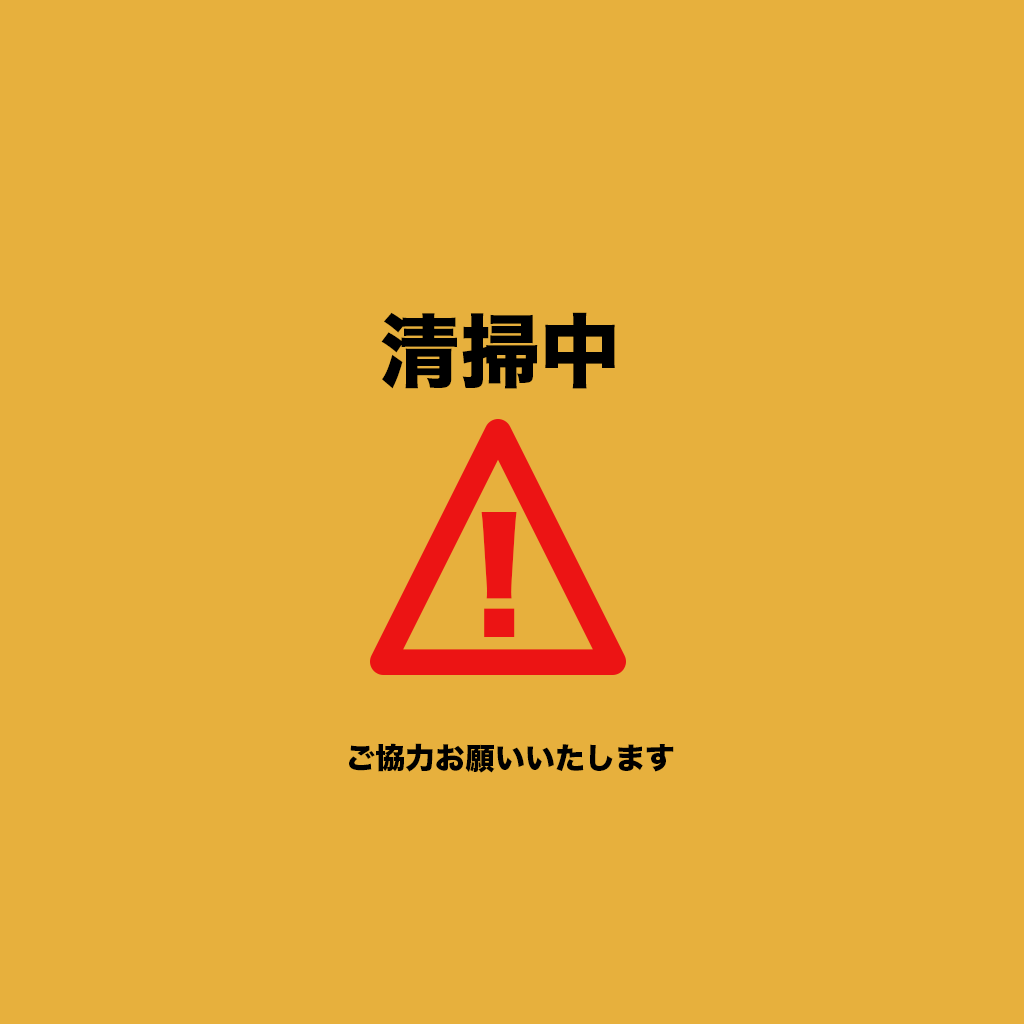
<style>
.page{position:relative;width:1024px;height:1024px;background:#e7b03d}
.page>*{position:absolute;margin:0}
.t1{font:80px "HiraKakuStdN-W8";color:#000000}
.t2{font:150px "HiraKakuStdN-W8";color:#ec1414}
.t3{font:30px "HiraKakuStdN-W8";color:#000000}
</style>
<div class="page">
<p class="t1" style="left:381px;top:312px;width:234px;height:77px">清掃中</p>
<p class="t2" style="left:481px;top:512px;width:36px;height:125px">!</p>
<p class="t3" style="left:349px;top:743px;width:325px;height:30px">ご協力お願いいたします</p>
</div>
